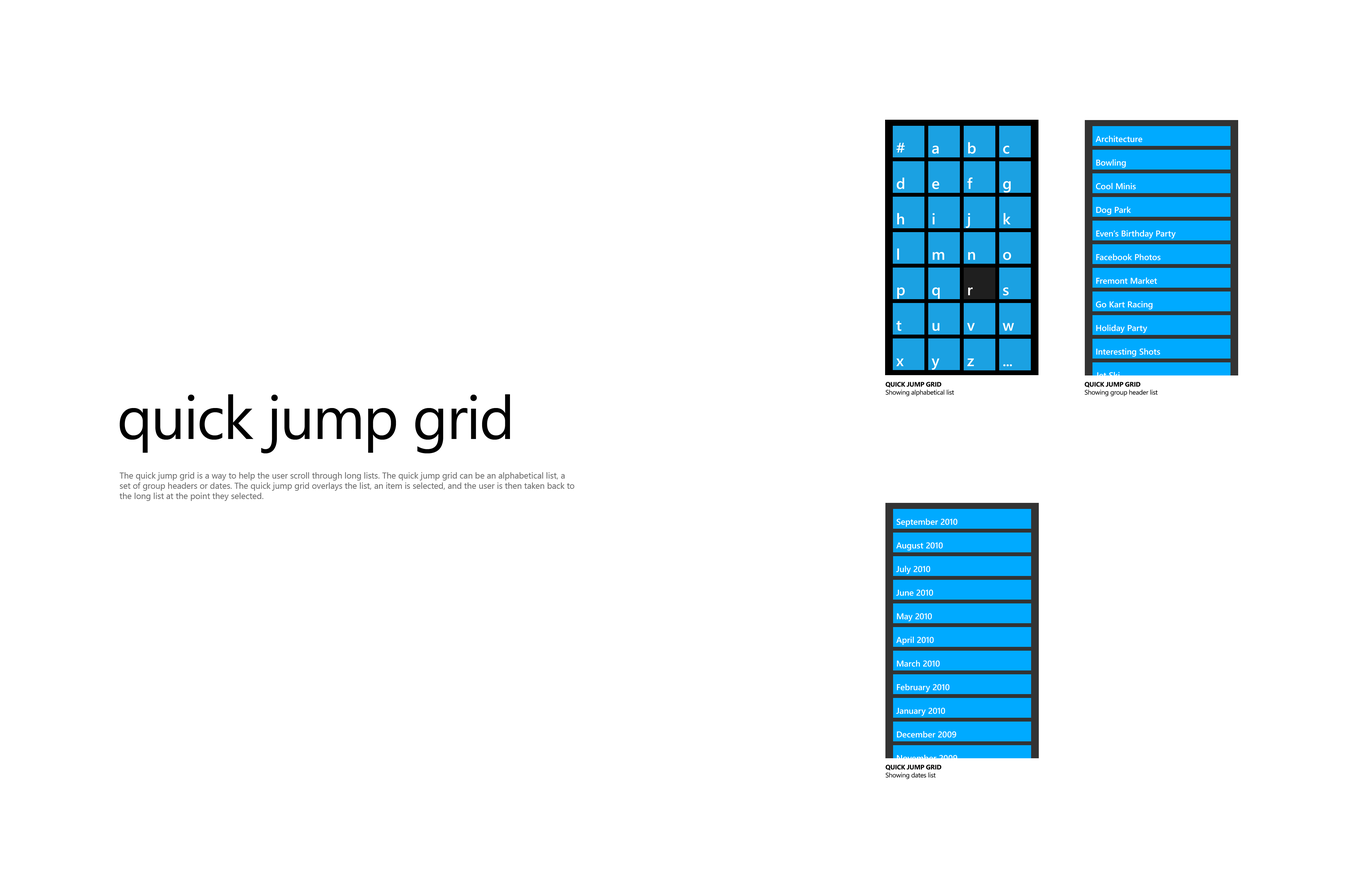
<style>
.page{position:relative;width:1358px;height:878px;background:#ffffff}
.page>*{position:absolute;margin:0}
.t1{font:8.5px "SegoeWP-Semibold";color:#ffffff}
.t2{font:15.3px "SegoeWP-Semibold";letter-spacing:-0.01em;color:#ffffff}
.t3{font:6.7px "SegoeWP";letter-spacing:-0.025em;color:#000000}
.t4{font:6.7px "SegoeWP-Bold";letter-spacing:-0.025em;color:#000000;text-transform:uppercase}
.t5{font:60.5px "SegoeUI";letter-spacing:-0.025em;color:#000000}
.t6{font:8.5px "SegoeUI";color:#666666}
</style>
<div class="page">
<p class="t1" style="left:1095px;top:136px;width:47px;height:6px">Architecture</p>
<p class="t2" style="left:896px;top:143px;width:9px;height:10px">#</p>
<p class="t2" style="left:932px;top:146px;width:6px;height:8px">a</p>
<p class="t2" style="left:968px;top:142px;width:7px;height:12px">b</p>
<p class="t2" style="left:1003px;top:146px;width:6px;height:8px">c</p>
<p class="t1" style="left:1096px;top:159px;width:30px;height:9px">Bowling</p>
<p class="t2" style="left:896px;top:178px;width:8px;height:11px">d</p>
<p class="t2" style="left:932px;top:181px;width:7px;height:8px">e</p>
<p class="t2" style="left:967px;top:177px;width:5px;height:12px">f</p>
<p class="t2" style="left:1003px;top:181px;width:7px;height:12px">g</p>
<p class="t1" style="left:1096px;top:183px;width:40px;height:6px">Cool Minis</p>
<p class="t1" style="left:1096px;top:207px;width:35px;height:8px">Dog Park</p>
<p class="t2" style="left:897px;top:213px;width:7px;height:12px">h</p>
<p class="t2" style="left:932px;top:213px;width:2px;height:12px">i</p>
<p class="t2" style="left:965px;top:213px;width:5px;height:15px">j</p>
<p class="t2" style="left:1003px;top:213px;width:7px;height:12px">k</p>
<p class="t1" style="left:1096px;top:230px;width:79px;height:9px">Even’s Birthday Party</p>
<p class="t2" style="left:897px;top:249px;width:2px;height:11px">l</p>
<p class="t2" style="left:932px;top:252px;width:12px;height:8px">m</p>
<p class="t2" style="left:968px;top:252px;width:7px;height:8px">n</p>
<p class="t2" style="left:1003px;top:252px;width:8px;height:8px">o</p>
<p class="t1" style="left:1096px;top:254px;width:64px;height:6px">Facebook Photos</p>
<p class="t1" style="left:1096px;top:278px;width:61px;height:6px">Fremont Market</p>
<p class="t2" style="left:897px;top:287px;width:8px;height:12px">p</p>
<p class="t2" style="left:932px;top:287px;width:7px;height:12px">q</p>
<p class="t2" style="left:968px;top:287px;width:4px;height:8px">r</p>
<p class="t2" style="left:1003px;top:287px;width:5px;height:9px">s</p>
<p class="t1" style="left:1095px;top:301px;width:57px;height:9px">Go Kart Racing</p>
<p class="t2" style="left:896px;top:321px;width:5px;height:10px">t</p>
<p class="t2" style="left:932px;top:323px;width:7px;height:8px">u</p>
<p class="t2" style="left:967px;top:323px;width:8px;height:8px">v</p>
<p class="t2" style="left:1002px;top:323px;width:12px;height:8px">w</p>
<p class="t1" style="left:1096px;top:325px;width:51px;height:8px">Holiday Party</p>
<p class="t1" style="left:1096px;top:348px;width:64px;height:9px">Interesting Shots</p>
<p class="t2" style="left:896px;top:358px;width:7px;height:8px">x</p>
<p class="t2" style="left:931px;top:358px;width:8px;height:12px">y</p>
<p class="t2" style="left:967px;top:358px;width:7px;height:8px">z</p>
<p class="t2" style="left:1003px;top:364px;width:9px;height:3px">...</p>
<p class="t1" style="left:1095px;top:372px;width:24px;height:7px">Jet Ski</p>
<p class="t3" style="left:885px;top:382px;width:69px;height:14px"><span class="t4">quick jump grid<br></span>Showing alphabetical list</p>
<p class="t3" style="left:1084px;top:382px;width:73px;height:14px"><span class="t4">quick jump grid<br></span>Showing group header list</p>
<p class="t5" style="left:119px;top:394px;width:391px;height:60px">quick jump grid</p>
<p class="t6" style="left:119px;top:472px;width:455px;height:29px">The quick jump grid is a way to help the user scroll through long lists. The quick jump grid can be an alphabetical list, a set of group headers or dates. The quick jump grid overlays the list, an item is selected, and the user is then taken back to the long list at the point they selected.</p>
<p class="t1" style="left:896px;top:519px;width:61px;height:8px">September 2010</p>
<p class="t1" style="left:896px;top:542px;width:47px;height:9px">August 2010</p>
<p class="t1" style="left:896px;top:566px;width:34px;height:8px">July 2010</p>
<p class="t1" style="left:896px;top:590px;width:37px;height:6px">June 2010</p>
<p class="t1" style="left:897px;top:613px;width:35px;height:9px">May 2010</p>
<p class="t1" style="left:896px;top:637px;width:37px;height:8px">April 2010</p>
<p class="t1" style="left:897px;top:661px;width:42px;height:6px">March 2010</p>
<p class="t1" style="left:897px;top:684px;width:52px;height:8px">February 2010</p>
<p class="t1" style="left:896px;top:708px;width:49px;height:8px">January 2010</p>
<p class="t1" style="left:897px;top:731px;width:59px;height:7px">December 2009</p>
<p class="t1" style="left:897px;top:755px;width:60px;height:6px">November 2009</p>
<p class="t3" style="left:885px;top:765px;width:56px;height:14px"><span class="t4">quick jump grid<br></span>Showing dates list</p>
</div>
